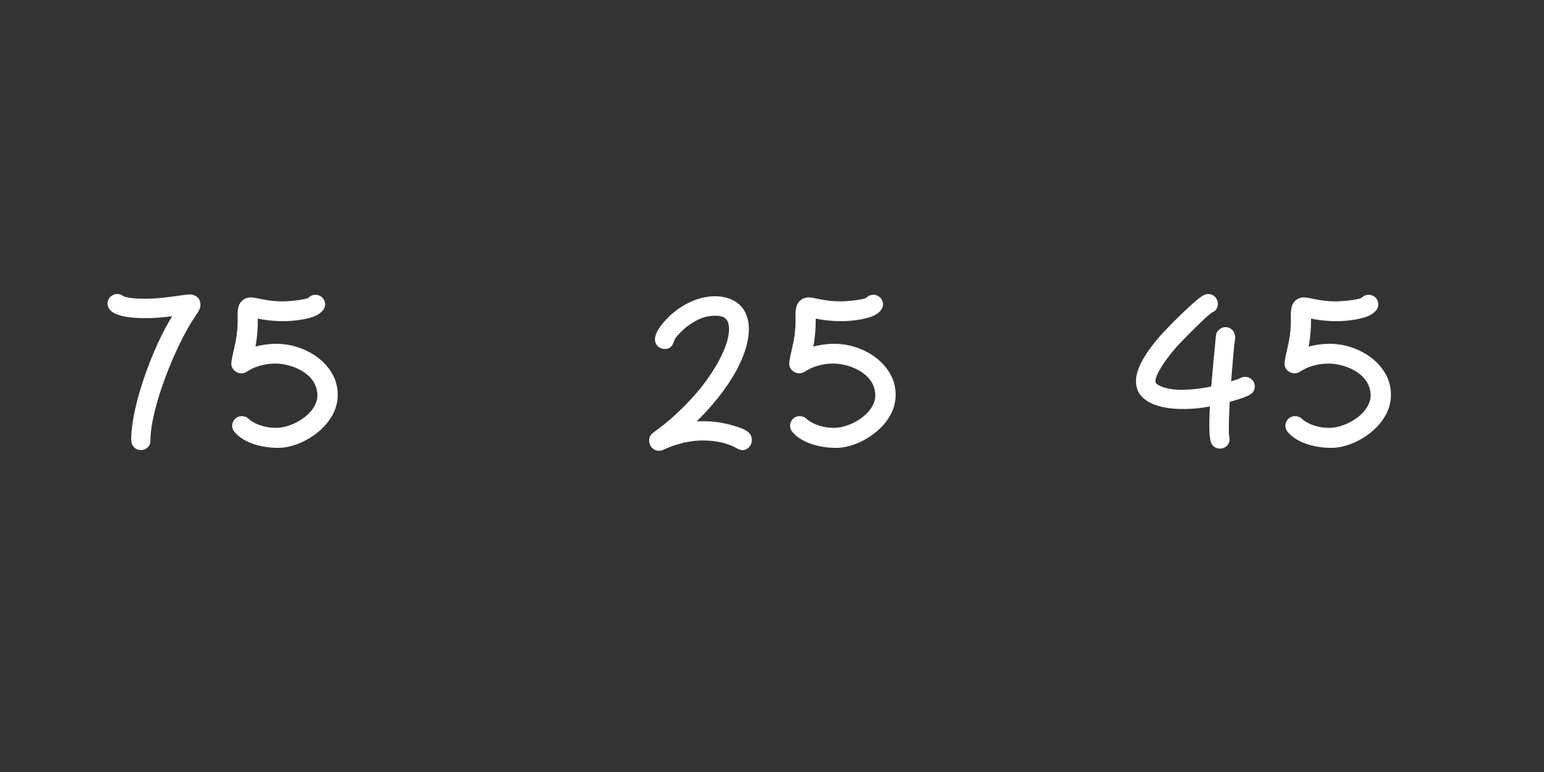
<style>
.page{position:relative;width:1544px;height:772px;background:#333333}
.page>*{position:absolute;margin:0}
.t1{font:216.5px "OverLight";letter-spacing:0.1em;color:#ffffff}
</style>
<div class="page">
<p class="t1" style="left:107px;top:294px;width:231px;height:156px">75</p>
<p class="t1" style="left:649px;top:295px;width:247px;height:156px">25</p>
<p class="t1" style="left:1136px;top:294px;width:255px;height:155px">45</p>
</div>
